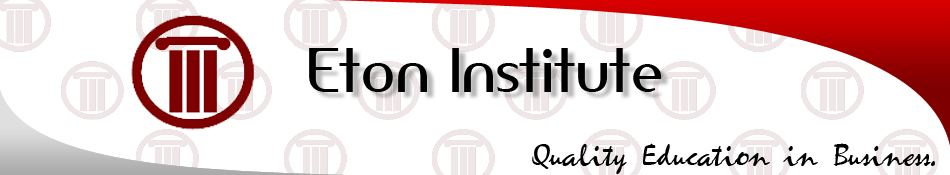
<style>
.page{position:relative;width:950px;height:175px;background:#ffffff}
.page>*{position:absolute;margin:0}
.t1{font:58.3px "AmerikaSans";color:#000000}
.t2{font:29.2px "Mariah";color:#000000}
</style>
<div class="page">
<p class="t1" style="left:309px;top:48px;width:353px;height:44px">Eton Institute</p>
<p class="t2" style="left:532px;top:143px;width:403px;height:31px">Quality Education in Business.</p>
</div>
